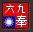
<style>
.page{position:relative;width:33px;height:32px;background:#f20000}
.page>*{position:absolute;margin:0}
.t1{font:10.4px "SimSun";color:#ffffff}
.t2{font:11.7px "SimSun";color:#ffffff}
</style>
<div class="page">
<p class="t1" style="left:5px;top:4px;width:20px;height:9px">六九</p>
<p class="t2" style="left:16px;top:15px;width:11px;height:12px">奉</p>
</div>
